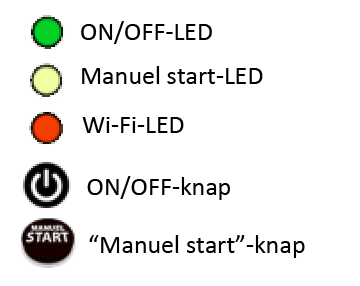
<style>
.page{position:relative;width:360px;height:286px;background:#ffffff}
.page>*{position:absolute;margin:0}
.t1{font:26px "Calibri";color:#000000}
</style>
<div class="page">
<p class="t1" style="left:81px;top:21px;width:131px;height:23px">ON/OFF-LED</p>
<p class="t1" style="left:82px;top:66px;width:181px;height:18px">Manuel start-LED</p>
<p class="t1" style="left:82px;top:117px;width:102px;height:16px">Wi-Fi-LED</p>
<p class="t1" style="left:87px;top:176px;width:143px;height:24px">ON/OFF-knap</p>
<p class="t1" style="left:89px;top:235px;width:216px;height:23px">“Manuel start”-knap</p>
</div>
